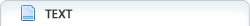
<style>
.page{position:relative;width:250px;height:26px;background:#ffffff}
.page>*{position:absolute;margin:0}
.t1{font:12px "Ebrima";color:#333333;text-transform:uppercase;font-weight:bold}
</style>
<div class="page">
<p class="t1" style="left:45px;top:9px;width:28px;height:10px">Text</p>
</div>
